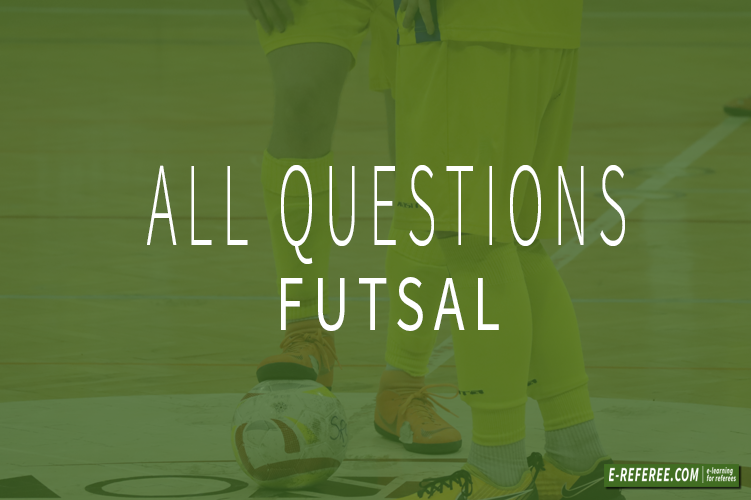
<style>
.page{position:relative;width:751px;height:500px}
.page>*{position:absolute;margin:0}
.t1{font:120px "SourceSansPro-Light";letter-spacing:0.16em;color:#ffffff;scale:0.48 1}
.t2{font:79.9px "SourceSansPro-Regular";letter-spacing:0.16em;color:#ffffff;scale:0.71 1}
</style>
<div class="page">
<p class="t1" style="left:147px;top:165px;width:478px;height:99px">ALL QUESTIONS</p>
<p class="t2" style="left:281px;top:277px;width:218px;height:54px">FUTSAL</p>
</div>
